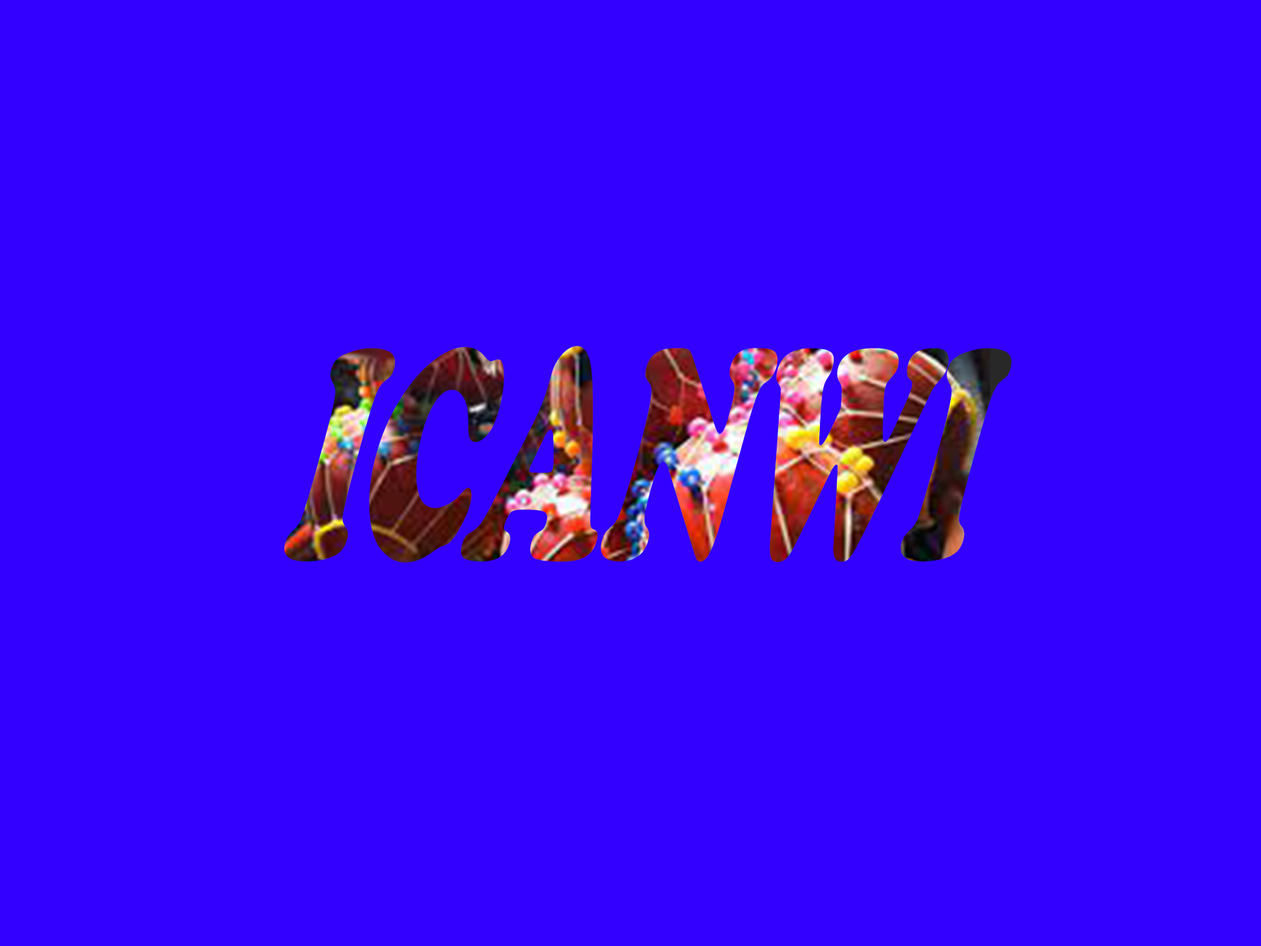
<style>
.page{position:relative;width:1261px;height:946px;background:#3300ff}
.page>*{position:absolute;margin:0}
.t1{font:322px "CooperBlack";scale:0.5 1}
</style>
<div class="page">
<p class="t1" style="left:284px;top:346px;width:728px;height:217px">ICANWI</p>
</div>
